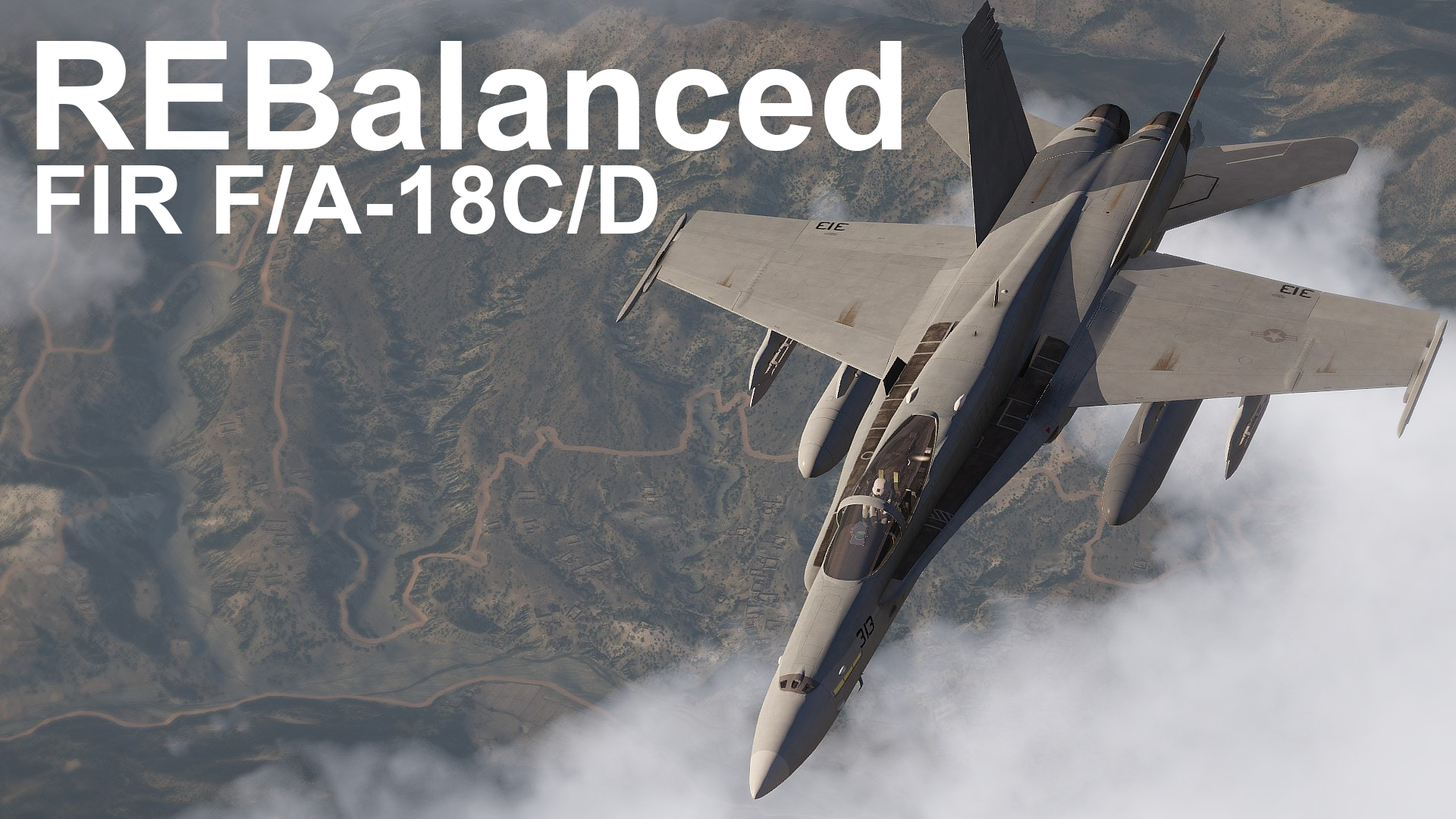
<style>
.page{position:relative;width:1456px;height:819px}
.page>*{position:absolute;margin:0}
.t1{font:151.7px "Arial-BoldMT";color:#ffffff}
.t2{font:94.8px "Arial-BoldMT";color:#ffffff}
</style>
<div class="page">
<p class="t1" style="left:36px;top:41px;width:866px;height:110px">REBalanced</p>
<p class="t2" style="left:37px;top:165px;width:621px;height:69px">FIR F/A-18C/D</p>
</div>
